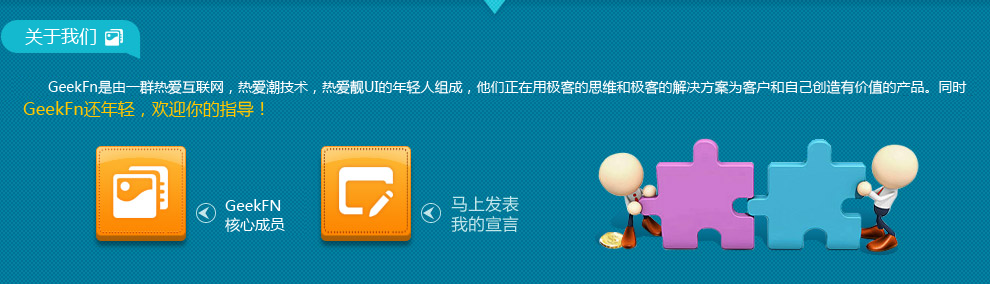
<style>
.page{position:relative;width:990px;height:284px}
.page>*{position:absolute;margin:0}
.t1{font:18px "MicrosoftYaHeiUI";color:#fefefe}
.t2{font:14px "MicrosoftYaHeiUI";color:#fefefe}
.t3{font:17px "MicrosoftYaHeiUI";color:#ffc600}
.t4{font:15px "MicrosoftYaHeiUI";color:#ffffff}
</style>
<div class="page">
<p class="t1" style="left:25px;top:28px;width:71px;height:17px">关于我们</p>
<p class="t2" style="left:48px;top:80px;width:919px;height:15px">GeekFn是由一群热爱互联网，热爱潮技术，热爱靓UI的年轻人组成，他们正在用极客的思维和极客的解决方案为客户和自己创造有价值的产品。同时</p>
<p class="t3" style="left:23px;top:101px;width:241px;height:16px">GeekFn还年轻，欢迎你的指导！</p>
<p class="t4" style="left:225px;top:199px;width:56px;height:12px">GeekFN</p>
<p class="t4" style="left:225px;top:217px;width:60px;height:15px">核心成员</p>
</div>
